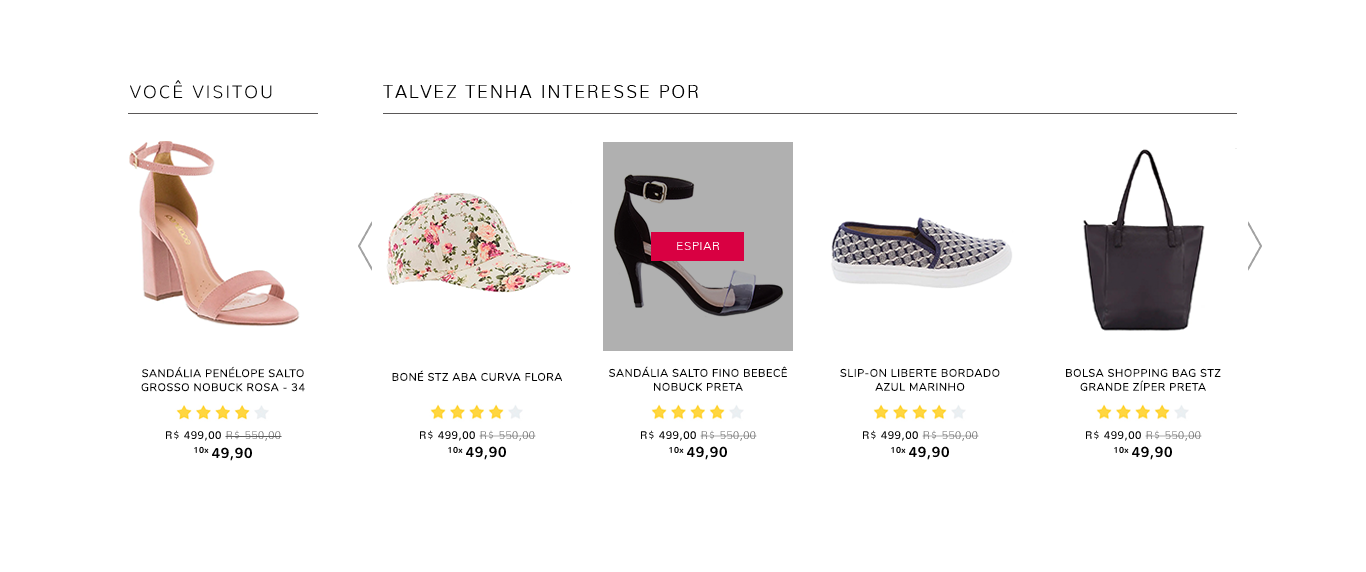
<style>
.page{position:relative;width:1366px;height:572px;background:#ffffff}
.page>*{position:absolute;margin:0}
.t1{font:18.2px "Nunito-ExtraLight";letter-spacing:0.1em;color:#000000}
.t2{font:18.2px "Nunito-ExtraLight";letter-spacing:0.1em;color:#000000;text-transform:uppercase}
.t3{font:12px "Nunito-ExtraLight";letter-spacing:0.05em;color:#ffffff}
.t4{font:11px/14px "Nunito-Regular";letter-spacing:0.05em;color:#000000}
.t5{font:11px "Nunito-Regular";letter-spacing:0.05em;color:#000000}
.t6{font:11.1px "Nunito-Regular";letter-spacing:0.05em;color:#000000}
.t7{font:11.1px "Nunito-ExtraLight";letter-spacing:0.05em;color:#5c5c5c}
.t8{font:14.2px "Nunito-Bold";letter-spacing:0.05em;color:#000000}
.t9{font:14.1px "Nunito-Bold";letter-spacing:0.05em;color:#000000}
</style>
<div class="page">
<p class="t1" style="left:130px;top:80px;width:142px;height:19px">VOCÊ VISITOU</p>
<p class="t2" style="left:383px;top:85px;width:315px;height:13px">talvez tenha interesse por</p>
<p class="t3" style="left:677px;top:242px;width:42px;height:8px">ESPIAR</p>
<p class="t4" style="left:141px;top:366px;width:164px;height:26px;text-align:center">SANDÁLIA PENÉLOPE SALTO GROSSO NOBUCK ROSA - 34</p>
<p class="t4" style="left:609px;top:366px;width:178px;height:25px;text-align:center">SANDÁLIA SALTO FINO BEBECÊ NOBUCK PRETA</p>
<p class="t5" style="left:392px;top:370px;width:170px;height:11px">BONÉ STZ ABA CURVA FLORA</p>
<p class="t4" style="left:840px;top:368px;width:160px;height:23px;text-align:center">SLIP-ON LIBERTE BORDADO<br>AZUL MARINHO</p>
<p class="t4" style="left:1066px;top:368px;width:155px;height:23px;text-align:center">BOLSA SHOPPING BAG STZ GRANDE ZÍPER PRETA</p>
<p class="t6" style="left:166px;top:430px;width:116px;height:11px">R$ 499,00 <span class="t7">R$ 550,00</span></p>
<p class="t6" style="left:420px;top:430px;width:116px;height:11px">R$ 499,00 <span class="t7">R$ 550,00</span></p>
<p class="t6" style="left:641px;top:430px;width:116px;height:11px">R$ 499,00 <span class="t7">R$ 550,00</span></p>
<p class="t6" style="left:863px;top:430px;width:116px;height:11px">R$ 499,00 <span class="t7">R$ 550,00</span></p>
<p class="t6" style="left:1086px;top:430px;width:116px;height:11px">R$ 499,00 <span class="t7">R$ 550,00</span></p>
<p class="t8" style="left:194px;top:446px;width:58px;height:15px">10x 49,90</p>
<p class="t9" style="left:448px;top:446px;width:58px;height:14px">10x 49,90</p>
<p class="t9" style="left:669px;top:446px;width:58px;height:14px">10x 49,90</p>
<p class="t9" style="left:891px;top:446px;width:58px;height:14px">10x 49,90</p>
<p class="t9" style="left:1114px;top:446px;width:58px;height:14px">10x 49,90</p>
</div>
